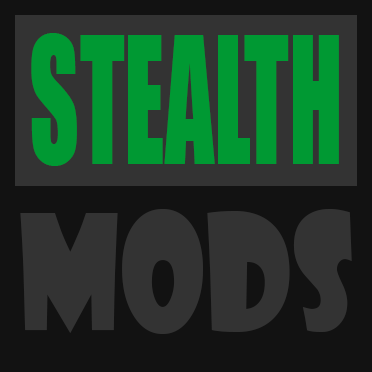
<style>
.page{position:relative;width:372px;height:372px;background:#333333}
.page>*{position:absolute;margin:0}
.t1{font:163.2px "Impact";color:#009933;scale:0.59 1}
.t2{font:156.1px "ShowcardGothic-Reg";color:#333333;scale:0.79 1}
</style>
<div class="page">
<p class="t1" style="left:31px;top:33px;width:308px;height:133px">STEALTH</p>
<p class="t2" style="left:20px;top:209px;width:332px;height:125px">MODS</p>
</div>
